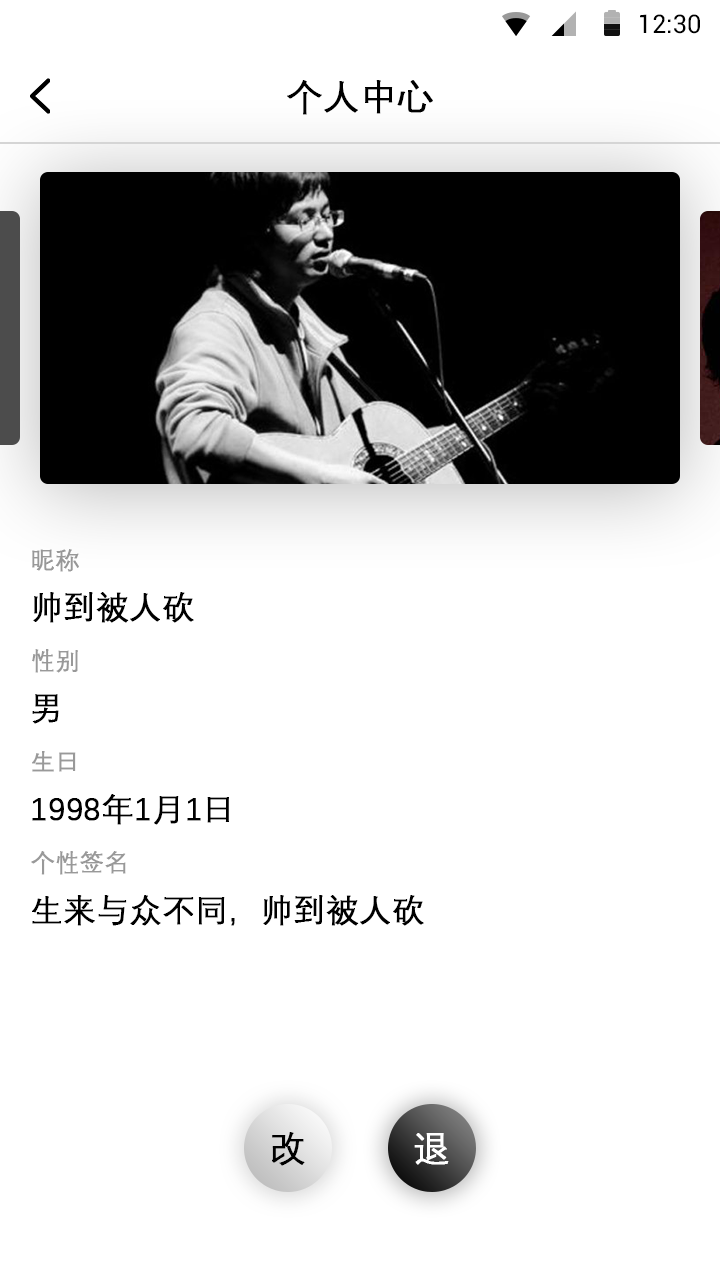
<style>
.page{position:relative;width:720px;height:1280px;background:#ffffff}
.page>*{position:absolute;margin:0}
.t1{font:25.4px "Roboto-Regular";color:#000000}
.t2{font:36px "DengXian-Regular";color:#000000;font-weight:bold}
.t3{font:24px "DengXian-Regular";color:#999999;font-weight:bold}
.t4{font:32px "DengXian-Regular";color:#000000;font-weight:bold}
.t5{font:36px "DengXian-Regular";color:#ffffff;font-weight:bold}
</style>
<div class="page">
<p class="t1" style="left:640px;top:14px;width:60px;height:20px">12:30</p>
<p class="t2" style="left:287px;top:80px;width:146px;height:35px">个人中心</p>
<p class="t3" style="left:32px;top:549px;width:47px;height:23px">昵称</p>
<p class="t4" style="left:33px;top:592px;width:161px;height:31px">帅到被人砍</p>
<p class="t3" style="left:32px;top:649px;width:46px;height:24px">性别</p>
<p class="t4" style="left:32px;top:694px;width:27px;height:30px">男</p>
<p class="t3" style="left:32px;top:751px;width:44px;height:21px">生日</p>
<p class="t4" style="left:32px;top:794px;width:197px;height:31px">1998年1月1日</p>
<p class="t3" style="left:31px;top:851px;width:95px;height:24px">个性签名</p>
<p class="t4" style="left:32px;top:895px;width:392px;height:31px">生来与众不同，帅到被人砍</p>
<p class="t2" style="left:272px;top:1132px;width:33px;height:34px">改</p>
<p class="t5" style="left:414px;top:1133px;width:35px;height:32px">退</p>
</div>
